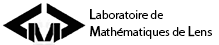
<style>
.page{position:relative;width:219px;height:45px;background:#ffffff}
.page>*{position:absolute;margin:0}
.t1{font:12px "MyriadPro-Regular";color:#000000}
.t2{font:14px "MyriadPro-Regular";color:#000000;font-weight:bold}
</style>
<div class="page">
<p class="t1" style="left:90px;top:9px;width:122px;height:30px"><span class="t2">L</span>aboratoire de <br><span class="t2">M</span>athématiques de <span class="t2">L</span>ens</p>
</div>
